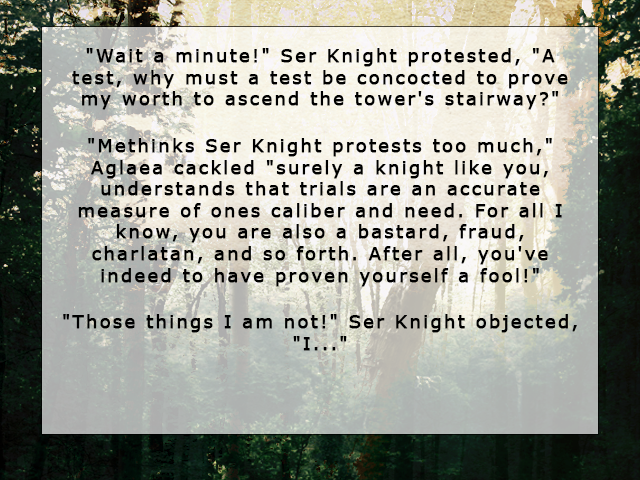
<style>
.page{position:relative;width:640px;height:480px}
.page>*{position:absolute;margin:0}
.t1{font:18px "Verdana";letter-spacing:0.1em;color:#000000;font-weight:bold}
</style>
<div class="page">
<p class="t1" style="left:63px;top:48px;width:514px;height:303px;text-align:center">"Wait a minute!" Ser Knight protested, "A test, why must a test be concocted to prove my worth to ascend the tower's stairway?"<br><br>"Methinks Ser Knight protests too much," Aglaea cackled "surely a knight like you, understands that trials are an accurate measure of ones caliber and need. For all I know, you are also a bastard, fraud, charlatan, and so forth. After all, you've indeed to have proven yourself a fool!"<br><br>"Those things I am not!" Ser Knight objected, "I..."</p>
</div>
